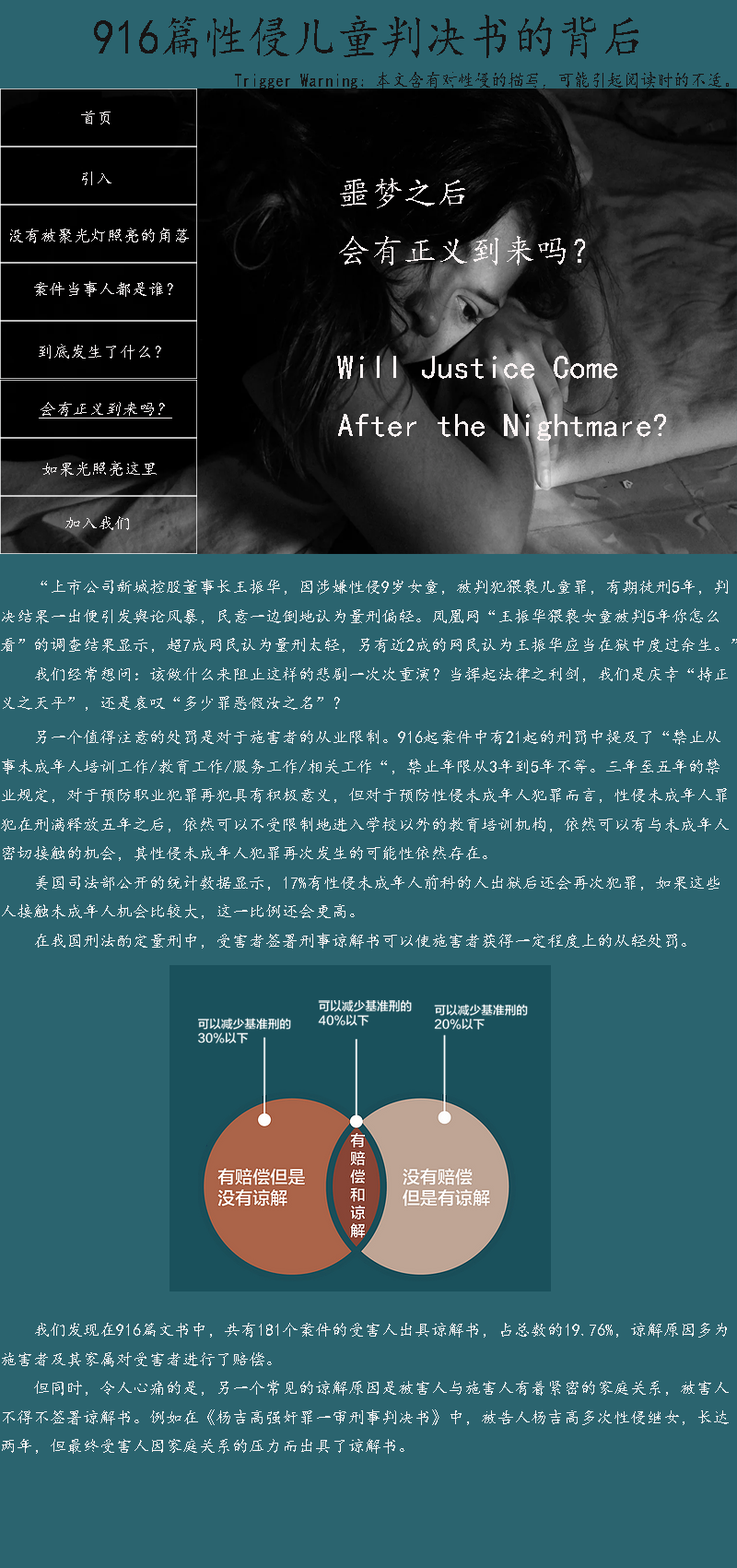
<style>
.page{position:relative;width:737px;height:1568px;background:#2b646f}
.page>*{position:absolute;margin:0}
.t1{font:49.2px "¿¬Ìå";color:#171414;scale:0.9 1}
.t2{font:18.4px "¿¬Ìå";color:#171414;scale:0.9 1}
.t3{font:16.6px "¿¬Ìå";color:#f9f5f5}
.t4{font:33.2px "¿¬Ìå";color:#fbf3f3}
.t5{font:16.6px "¿¬Ìå";color:#f9f4f4;font-style:italic;text-decoration:underline}
.t6{font:16.6px "¿¬Ìå";color:#fbf3f3}
</style>
<div class="page">
<p class="t1" style="left:94px;top:15px;width:545px;height:44px">916篇性侵儿童判决书的背后</p>
<p class="t2" style="left:235px;top:72px;width:494px;height:17px">Trigger Warning：本文含有对性侵的描写，可能引起阅读时的不适。</p>
<p class="t3" style="left:81px;top:111px;width:30px;height:13px">首页</p>
<p class="t3" style="left:82px;top:171px;width:30px;height:14px">引入</p>
<p class="t4" style="left:337px;top:178px;width:329px;height:263px">噩梦之后​<br>会有正义到来吗？<br> <br>Will Justice Come <br>After the Nightmare?</p>
<p class="t3" style="left:10px;top:228px;width:179px;height:15px">没有被聚光灯照亮的角落</p>
<p class="t3" style="left:34px;top:281px;width:139px;height:16px">案件当事人都是谁？</p>
<p class="t3" style="left:39px;top:344px;width:122px;height:16px">到底发生了什么？</p>
<p class="t5" style="left:39px;top:402px;width:133px;height:17px">会有正义到来吗？</p>
<p class="t3" style="left:42px;top:461px;width:115px;height:16px">如果光照亮这里</p>
<p class="t3" style="left:65px;top:516px;width:64px;height:14px">加入我们</p>
<p class="t6" style="left:1px;top:579px;width:737px;height:132px">“上市公司新城控股董事长王振华，因涉嫌性侵9岁女童，被判犯猥亵儿童罪，有期徒刑5年，判<br>决结果一出便引发舆论风暴，民意一边倒地认为量刑偏轻。凤凰网“王振华猥亵女童被判5年你怎么<br>看”的调查结果显示，超7成网民认为量刑太轻，另有近2成的网民认为王振华应当在狱中度过余生。”<br>    我们经常想问：该做什么来阻止这样的悲剧一次次重演？当挥起法律之利剑，我们是庆幸“持正<br>义之天平”，还是哀叹“多少罪恶假汝之名”？</p>
<p class="t6" style="left:1px;top:729px;width:728px;height:220px">另一个值得注意的处罚是对于施害者的从业限制。916起案件中有21起的刑罚中提及了“禁止从<br>事未成年人培训工作/教育工作/服务工作/相关工作“，禁止年限从3年到5年不等。三年至五年的禁<br>业规定，对于预防职业犯罪再犯具有积极意义，但对于预防性侵未成年人犯罪而言，性侵未成年人罪<br>犯在刑满释放五年之后，依然可以不受限制地进入学校以外的教育培训机构，依然可以有与未成年人<br>密切接触的机会，其性侵未成年人犯罪再次发生的可能性依然存在。<br>    美国司法部公开的统计数据显示，17%有性侵未成年人前科的人出狱后还会再次犯罪，如果这些<br>人接触未成年人机会比较大，这一比例还会更高。<br>    在我国刑法酌定量刑中，受害者签署刑事谅解书可以使施害者获得一定程度上的从轻处罚。</p>
<p class="t6" style="left:2px;top:1323px;width:727px;height:131px">我们发现在916篇文书中，共有181个案件的受害人出具谅解书，占总数的19.76%，谅解原因多为<br>施害者及其家属对受害者进行了赔偿。<br>    但同时，令人心痛的是，另一个常见的谅解原因是被害人与施害人有着紧密的家庭关系，被害人<br>不得不签署谅解书。例如在《杨吉高强奸罪一审刑事判决书》中，被告人杨吉高多次性侵继女，长达<br>两年，但最终受害人因家庭关系的压力而出具了谅解书。</p>
</div>
